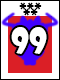
<style>
.page{position:relative;width:60px;height:80px;background:#ffffff}
.page>*{position:absolute;margin:0}
.t1{font:16.7px "ShowcardGothic-Reg";color:#000000}
.t2{font:33.3px "ShowcardGothic-Reg";color:#ffffff}
</style>
<div class="page">
<p class="t1" style="left:19px;top:2px;width:23px;height:8px">***</p>
<p class="t1" style="left:23px;top:8px;width:15px;height:8px">**</p>
<p class="t2" style="left:11px;top:27px;width:36px;height:27px">99</p>
</div>
